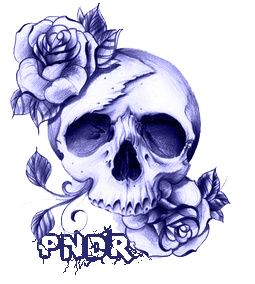
<style>
.page{position:relative;width:255px;height:284px;background:#ffffff}
.page>*{position:absolute;margin:0}
.t1{font:48px "INFECTED";color:#28266c}
</style>
<div class="page">
<p class="t1" style="left:32px;top:225px;width:120px;height:50px">Pndr</p>
</div>
